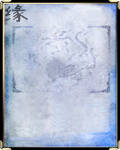
<style>
.page{position:relative;width:120px;height:150px}
.page>*{position:absolute;margin:0}
.t1{font:25px "FZGLJW--GB1-0";color:#464b55}
</style>
<div class="page">
<p class="t1" style="left:5px;top:4px;width:23px;height:18px">缘</p>
</div>
